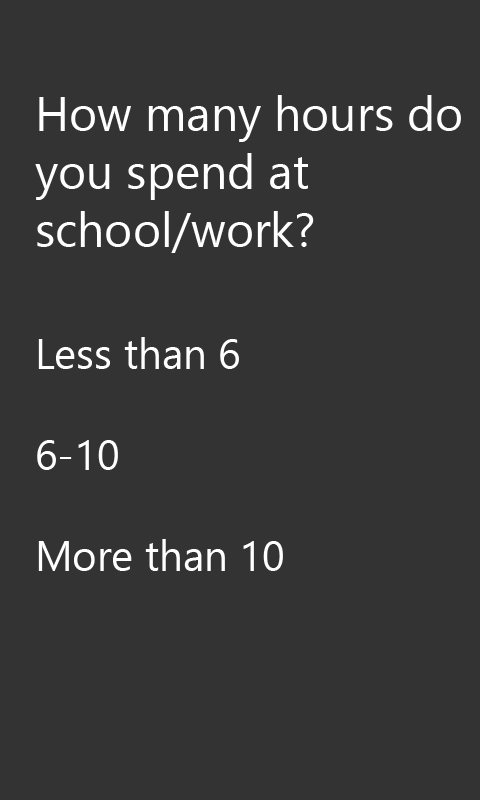
<style>
.page{position:relative;width:480px;height:800px;background:#333333}
.page>*{position:absolute;margin:0}
.t1{font:48px "SegoeUIHistoric";color:#ffffff}
.t2{font:42px "SegoeUIHistoric";color:#ffffff}
</style>
<div class="page">
<p class="t1" style="left:35px;top:95px;width:426px;height:476px">How many hours do<br>you spend at <br>school/work?<br><br><span class="t2">Less than 6<br><br>6-10<br><br>More than 10</span></p>
</div>
